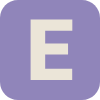
<style>
.page{position:relative;width:100px;height:100px;background:#9085ba}
.page>*{position:absolute;margin:0}
.t1{font:85px "Roboto-Black";color:#ebe5d8}
</style>
<div class="page">
<p class="t1" style="left:30px;top:19px;width:43px;height:61px">E</p>
</div>
